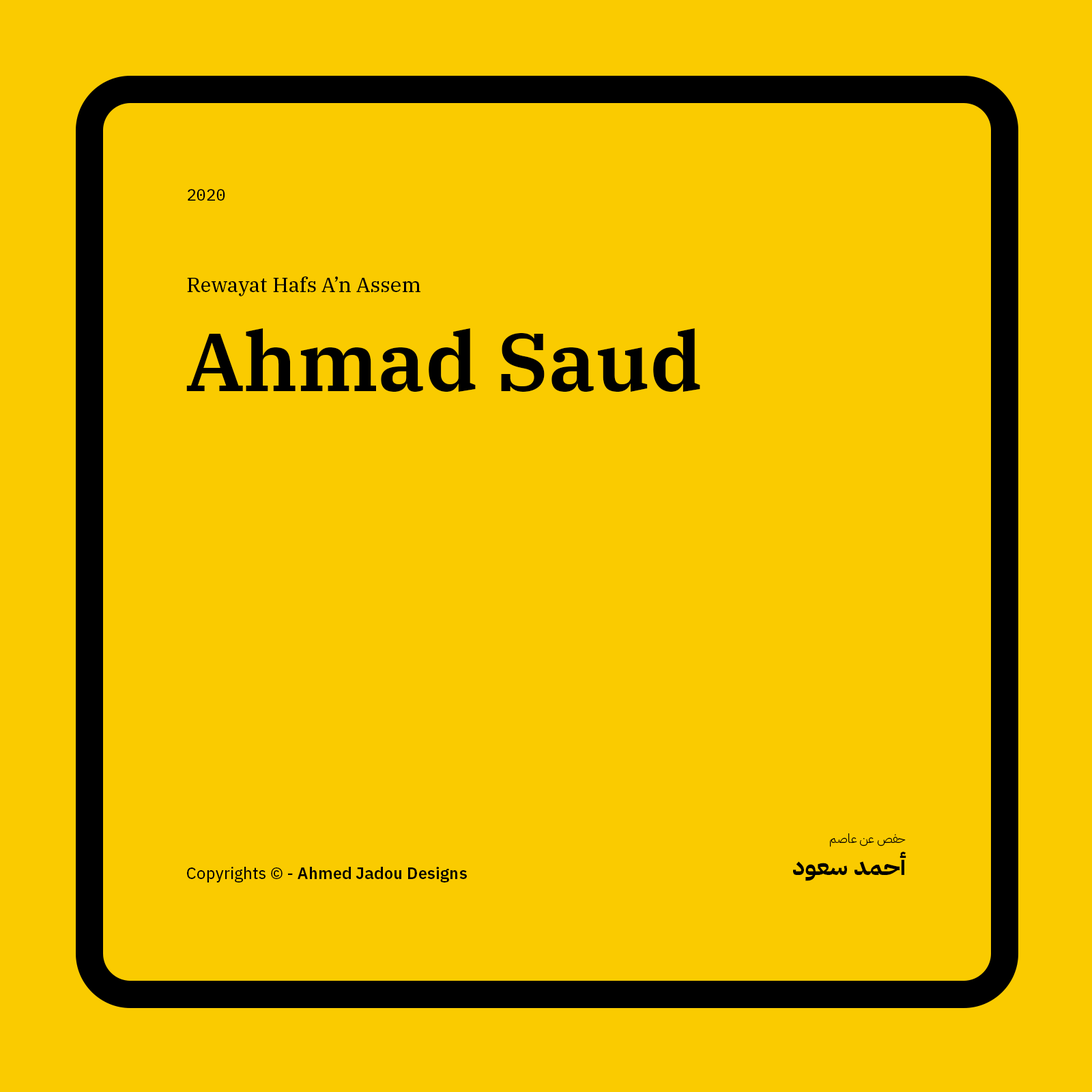
<style>
.page{position:relative;width:1092px;height:1092px;background:#facb00}
.page>*{position:absolute;margin:0}
.t1{font:16.4px "IBMPlexMono-Text";color:#000000}
.t2{font:20.5px "IBMPlexSerif-Text";color:#000000}
.t3{font:81.9px "IBMPlexSerif-SemiBold";color:#000000}
.t4{font:12.3px "IBMPlexArabic-Light";color:#000000}
.t5{font:24.6px "IBMPlexArabic-Bold";color:#000000}
.t6{font:16.4px "IBMPlexSans-SemiBold";color:#000000}
.t7{font:16.4px "IBMPlexSans-Text";color:#000000}
</style>
<div class="page">
<p class="t1" style="left:188px;top:189px;width:37px;height:12px">2020</p>
<p class="t2" style="left:187px;top:276px;width:233px;height:20px">Rewayat Hafs A’n Assem</p>
<p class="t3" style="left:186px;top:328px;width:514px;height:64px">Ahmad Saud</p>
<p class="t4" style="left:830px;top:833px;width:76px;height:14px">حفص عن عاصم</p>
<p class="t5" style="left:793px;top:852px;width:113px;height:29px">أحمد سعود</p>
<p class="t6" style="left:187px;top:867px;width:280px;height:15px"><span class="t7">Copyrights © - </span>Ahmed Jadou Designs</p>
</div>
